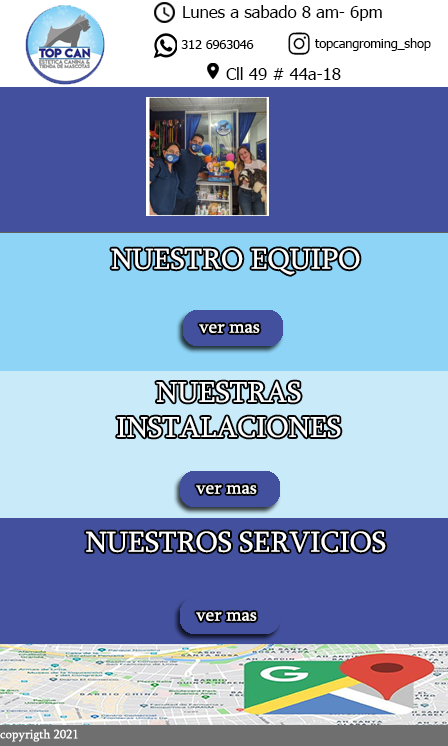
<style>
.page{position:relative;width:448px;height:746px;background:#43509d}
.page>*{position:absolute;margin:0}
.t1{font:16.7px "Tahoma";color:#000000}
.t2{font:12.5px "Tahoma";color:#000000}
.t3{font:29.2px "Sylfaen";color:#ffffff}
.t4{font:18.7px "Sylfaen";color:#ffffff}
.t5{font:12.5px "Sylfaen";color:#ffffff}
</style>
<div class="page">
<p class="t1" style="left:183px;top:5px;width:199px;height:16px">Lunes a sabado 8 am- 6pm</p>
<p class="t2" style="left:181px;top:40px;width:73px;height:9px">312 6963046</p>
<p class="t2" style="left:315px;top:38px;width:116px;height:13px">topcangroming_shop</p>
<p class="t1" style="left:226px;top:67px;width:115px;height:13px">Cll 49 # 44a-18</p>
<p class="t3" style="left:111px;top:248px;width:249px;height:27px">NUESTRO EQUIPO</p>
<p class="t4" style="left:199px;top:324px;width:61px;height:9px">ver mas</p>
<p class="t3" style="left:117px;top:381px;width:224px;height:57px;text-align:center">NUESTRAS INSTALACIONES</p>
<p class="t4" style="left:196px;top:485px;width:61px;height:9px">ver mas</p>
<p class="t3" style="left:86px;top:531px;width:300px;height:22px">NUESTROS SERVICIOS</p>
<p class="t4" style="left:196px;top:612px;width:61px;height:9px">ver mas</p>
<p class="t5" style="left:0px;top:729px;width:78px;height:13px">copyrigth 2021</p>
</div>
